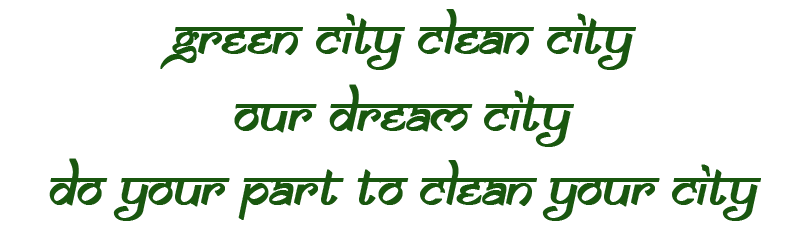
<style>
.page{position:relative;width:800px;height:250px;background:#ffffff}
.page>*{position:absolute;margin:0}
.t1{font:50px "SamarkanOblique";letter-spacing:-0.02em;color:#19570f;font-weight:bold}
</style>
<div class="page">
<p class="t1" style="left:160px;top:9px;width:476px;height:61px">green city clean city</p>
<p class="t1" style="left:234px;top:84px;width:340px;height:63px">Our dream city</p>
<p class="t1" style="left:49px;top:158px;width:712px;height:63px">do your part to clean your city</p>
</div>
